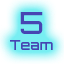
<style>
.page{position:relative;width:64px;height:64px}
.page>*{position:absolute;margin:0}
.t1{font:14px "Orbitron-Medium";color:#4744b4}
.t2{font:30px "Orbitron-Medium";color:#4744b4}
</style>
<div class="page">
<p class="t1" style="left:10px;top:12px;width:43px;height:38px;text-align:center"><span class="t2">5<br></span>Team</p>
</div>
